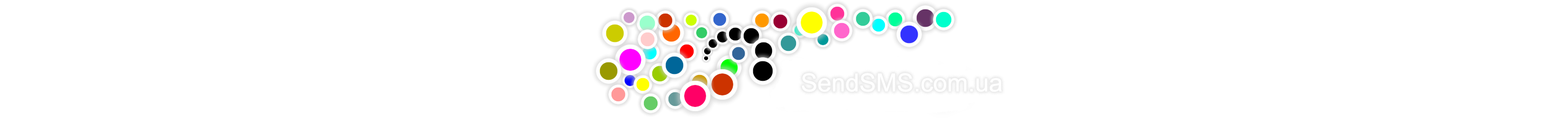
<style>
.page{position:relative;width:1568px;height:118px;background:#ffffff}
.page>*{position:absolute;margin:0}
.t1{font:25.1px "ArialMT";color:#ffffff}
</style>
<div class="page">
<p class="t1" style="left:802px;top:73px;width:200px;height:19px">SendSMS.com.ua</p>
</div>
